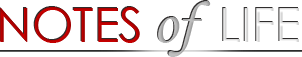
<style>
.page{position:relative;width:302px;height:57px;background:#ffffff}
.page>*{position:absolute;margin:0}
.t1{font:48px "CenturyGothic";color:#c70000}
.t2{font:60px "MonotypeCorsiva";color:#bfbfbf}
.t3{font:48px "CenturyGothic";color:#ffffff}
</style>
<div class="page">
<p class="t1" style="left:0px;top:1px;width:299px;height:56px">NOTES<span class="t2">of  </span><span class="t3">LIFE</span></p>
</div>
